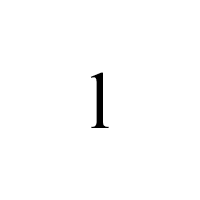
<style>
.page{position:relative;width:200px;height:200px;background:#ffffff}
.page>*{position:absolute;margin:0}
.t1{font:80px "TimesNewRomanPSMT";color:#000000}
</style>
<div class="page">
<p class="t1" style="left:90px;top:72px;width:19px;height:56px">l</p>
</div>
